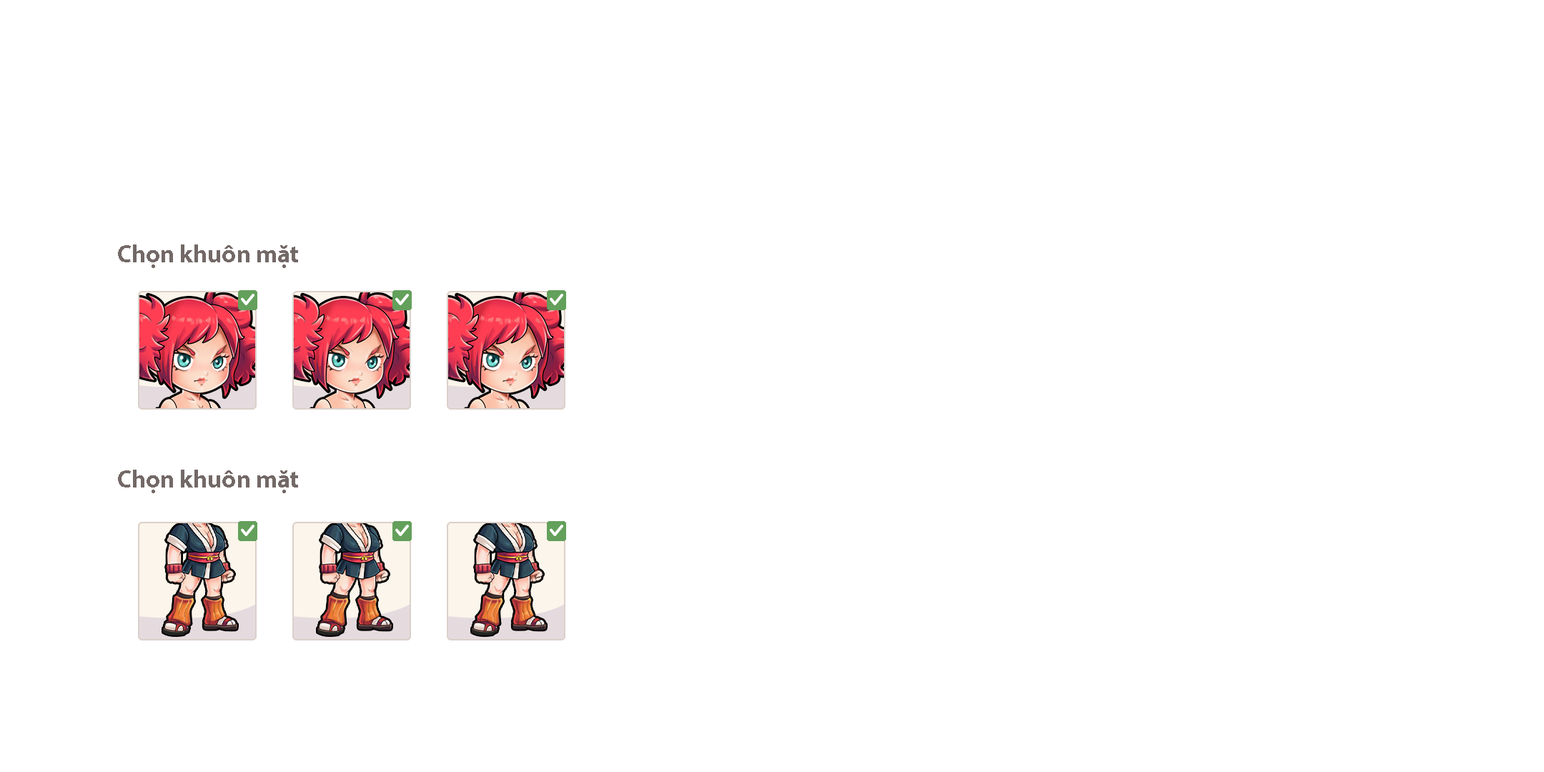
<style>
.page{position:relative;width:1544px;height:772px;background:#ffffff}
.page>*{position:absolute;margin:0}
.t1{font:25px "MyriadPro-Bold";color:#736967}
</style>
<div class="page">
<p class="t1" style="left:118px;top:245px;width:180px;height:23px">Chọn khuôn mặt</p>
<p class="t1" style="left:118px;top:470px;width:180px;height:23px">Chọn khuôn mặt</p>
</div>
